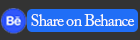
<style>
.page{position:relative;width:140px;height:40px;background:#333333}
.page>*{position:absolute;margin:0}
.t1{font:16px "ACaslonPro-Regular";letter-spacing:-0.05em;color:#f8f8fa}
</style>
<div class="page">
<p class="t1" style="left:31px;top:14px;width:104px;height:12px">Share on Behance</p>
</div>
